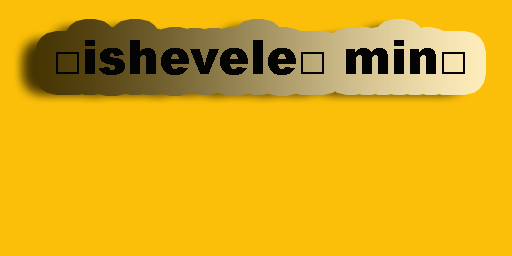
<style>
.page{position:relative;width:512px;height:256px;background:#fbbf09}
.page>*{position:absolute;margin:0}
.t1{font:48px "Arial-Black";color:#040404}
</style>
<div class="page">
<p class="t1" style="left:56px;top:40px;width:409px;height:35px">□ishevele□ min□</p>
</div>
